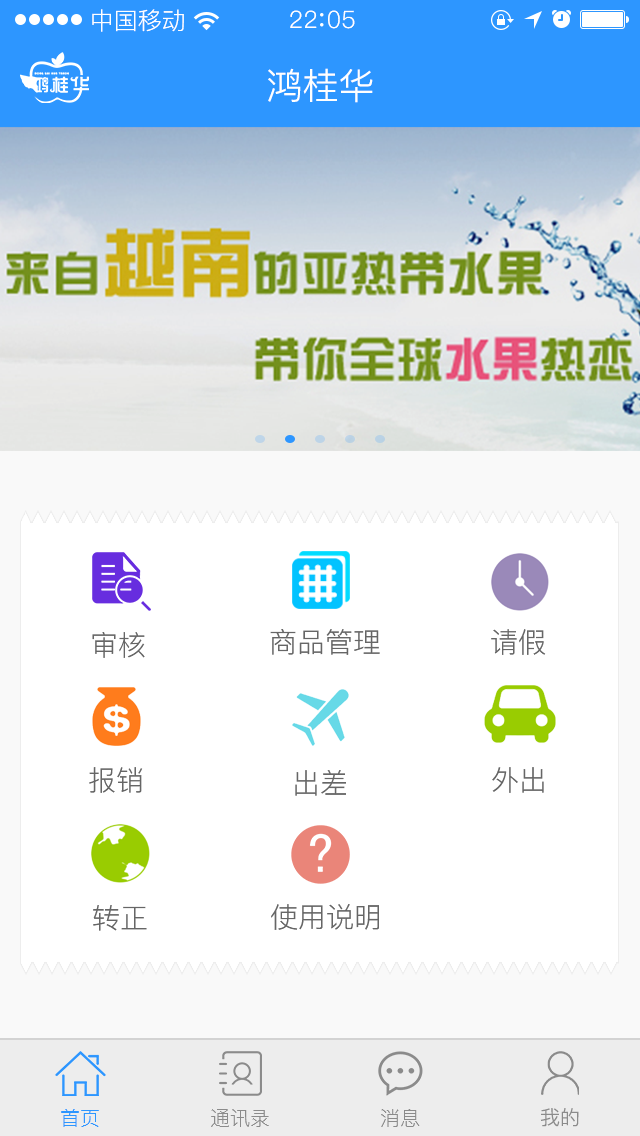
<style>
.page{position:relative;width:640px;height:1136px;background:#ffffff}
.page>*{position:absolute;margin:0}
.t1{font:24px "PingFang-SC-Regular";color:#ffffff}
.t2{font:24px "PingFang-SC-Regular";letter-spacing:0.03em;color:#ffffff}
.t3{font:36px "PingFang-SC-Regular";color:#ffffff}
.t4{font:28px "PingFang-SC-Regular";color:#666666}
.t5{font:20px "PingFang-SC-Regular";color:#2d96ff}
.t6{font:20px "PingFang-SC-Regular";color:#8b8b8b}
</style>
<div class="page">
<p class="t1" style="left:92px;top:9px;width:92px;height:23px">中国移动</p>
<p class="t2" style="left:290px;top:10px;width:65px;height:19px">22 05</p>
<p class="t3" style="left:268px;top:68px;width:105px;height:35px">鸿桂华</p>
<p class="t4" style="left:270px;top:629px;width:110px;height:26px">商品管理</p>
<p class="t4" style="left:491px;top:629px;width:55px;height:26px">请假</p>
<p class="t4" style="left:92px;top:632px;width:53px;height:26px">审核</p>
<p class="t4" style="left:89px;top:767px;width:54px;height:26px">报销</p>
<p class="t4" style="left:295px;top:770px;width:51px;height:26px">出差</p>
<p class="t4" style="left:492px;top:767px;width:52px;height:26px">外出</p>
<p class="t4" style="left:93px;top:905px;width:54px;height:26px">转正</p>
<p class="t4" style="left:271px;top:904px;width:108px;height:26px">使用说明</p>
<p class="t5" style="left:61px;top:1109px;width:38px;height:18px">首页</p>
<p class="t6" style="left:211px;top:1109px;width:58px;height:18px">通讯录</p>
<p class="t6" style="left:381px;top:1109px;width:39px;height:18px">消息</p>
<p class="t6" style="left:540px;top:1108px;width:39px;height:19px">我的</p>
</div>
